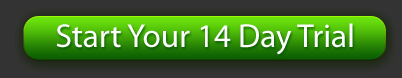
<style>
.page{position:relative;width:402px;height:78px}
.page>*{position:absolute;margin:0}
.t1{font:33.2px "MyriadPro-Regular";color:#ffffff}
</style>
<div class="page">
<p class="t1" style="left:56px;top:23px;width:297px;height:32px">Start Your 14 Day Trial</p>
</div>
